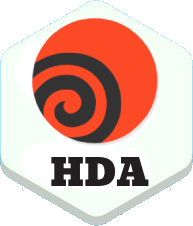
<style>
.page{position:relative;width:193px;height:226px;background:#ffffff}
.page>*{position:absolute;margin:0}
.t1{font:37.3px "Angkor-Regular";color:#231f20}
</style>
<div class="page">
<p class="t1" style="left:51px;top:156px;width:98px;height:31px">HDA</p>
</div>
